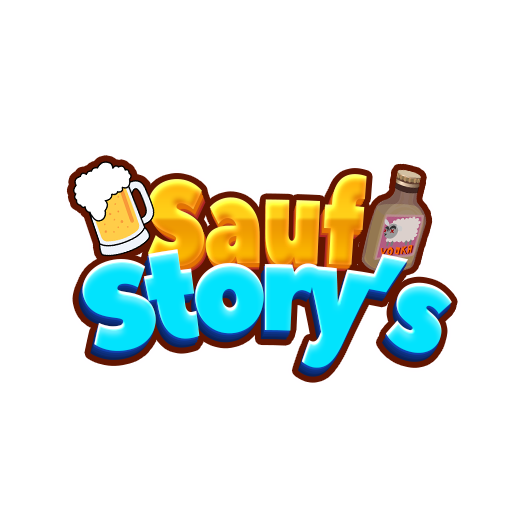
<style>
.page{position:relative;width:512px;height:512px;background:#ffffff}
.page>*{position:absolute;margin:0}
.t1{font:115px "PeaceSans";letter-spacing:-0.025em;scale:0.83 1}
.t2{font:113.9px "PeaceSans";letter-spacing:-0.025em;scale:0.83 1}
.t3{font:112.7px "PeaceSans";letter-spacing:-0.025em;scale:0.83 1}
.t4{font:111.6px "PeaceSans";letter-spacing:-0.025em;scale:0.83 1}
.t5{font:110.5px "PeaceSans";letter-spacing:-0.025em;scale:0.83 1}
.t6{font:109.4px "PeaceSans";letter-spacing:-0.025em;scale:0.83 1}
.t7{font:108.3px "PeaceSans";letter-spacing:-0.025em;scale:0.83 1}
.t8{font:107.2px "PeaceSans";letter-spacing:-0.025em;scale:0.83 1}
.t9{font:124.6px "PeaceSans";letter-spacing:-0.075em;color:#02e3fd;scale:0.77 1}
</style>
<div class="page">
<p class="t1" style="left:147px;top:174px;width:220px;height:93px">Sauf</p>
<p class="t2" style="left:149px;top:176px;width:217px;height:92px">Sauf</p>
<p class="t3" style="left:150px;top:179px;width:215px;height:91px">Sauf</p>
<p class="t4" style="left:151px;top:180px;width:213px;height:91px">Sauf</p>
<p class="t5" style="left:152px;top:182px;width:211px;height:89px">Sauf</p>
<p class="t6" style="left:153px;top:183px;width:209px;height:89px">Sauf</p>
<p class="t7" style="left:154px;top:185px;width:206px;height:87px">Sauf</p>
<p class="t8" style="left:155px;top:186px;width:204px;height:87px">Sauf</p>
<p class="t9" style="left:82px;top:249px;width:370px;height:119px">Story’s</p>
</div>
